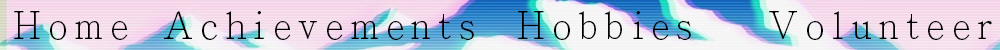
<style>
.page{position:relative;width:1000px;height:50px}
.page>*{position:absolute;margin:0}
.t1{font:37px "AdobeMingStd-Light";letter-spacing:0.2em;color:#000000}
</style>
<div class="page">
<p class="t1" style="left:14px;top:11px;width:978px;height:29px">Home Achievements Hobbies  Volunteer</p>
</div>
